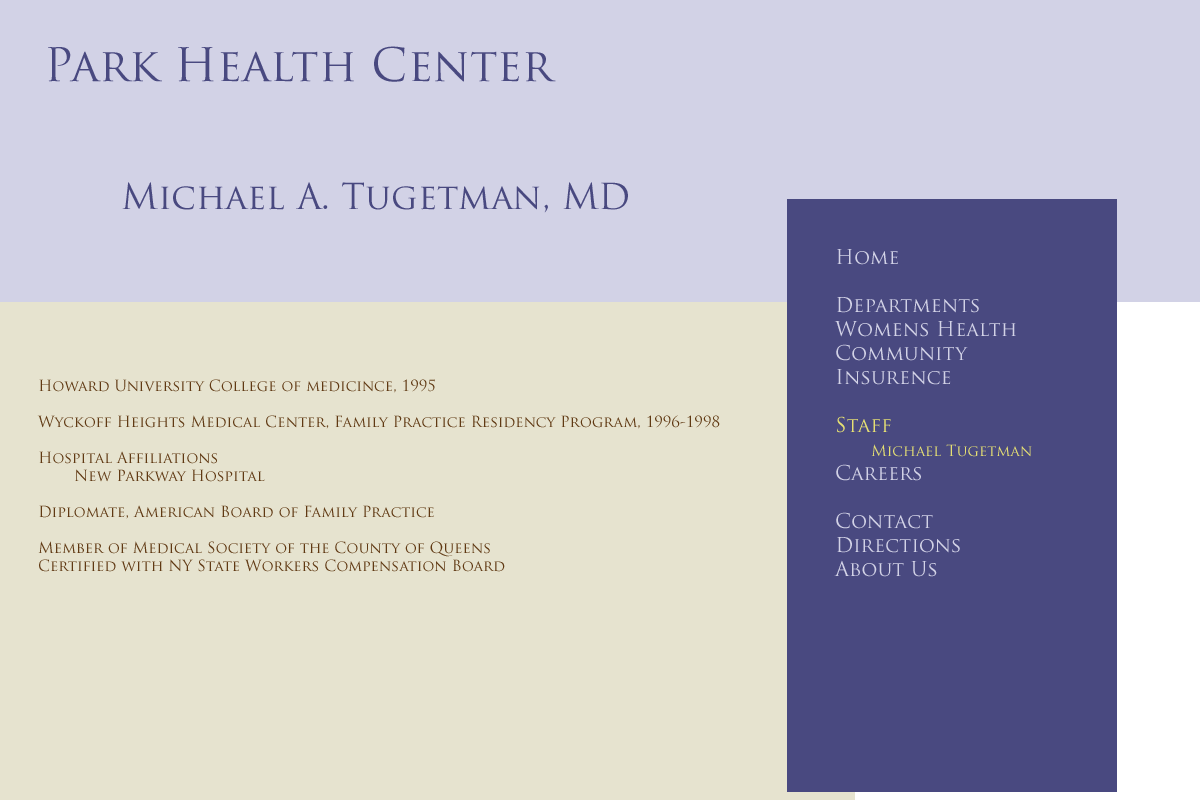
<style>
.page{position:relative;width:1200px;height:800px;background:#e6e3cf}
.page>*{position:absolute;margin:0}
.t1{font:45px "TrajanPro-Regular";color:#494980}
.t2{font:35px "TrajanPro-Regular";color:#494980}
.t3{font:20px "TrajanPro-Regular";color:#d2d2e6}
.t4{font:20px "TrajanPro-Regular";color:#e6e073}
.t5{font:15px "TrajanPro-Regular";color:#e6e073}
.t6{font:15px "TrajanPro-Regular";color:#603913}
</style>
<div class="page">
<p class="t1" style="left:48px;top:46px;width:508px;height:36px">Park Health Center</p>
<p class="t2" style="left:122px;top:182px;width:506px;height:31px">Michael A. Tugetman, MD</p>
<p class="t3" style="left:834px;top:249px;width:198px;height:328px">Home<br><br>Departments<br>Womens Health<br>Community<br>Insurence<br><br><span class="t4">Staff<br> </span><span class="t5">Michael Tugetman<br></span>Careers<br><br>Contact<br>Directions<br>About Us</p>
<p class="t6" style="left:37px;top:379px;width:683px;height:193px">Howard University College of medicince, 1995<br><br>Wyckoff Heights Medical Center, Family Practice Residency Program, 1996-1998<br><br>Hospital Affiliations<br> New Parkway Hospital<br><br>Diplomate, American Board of Family Practice<br><br>Member of Medical Society of the County of Queens<br>Certified with NY State Workers Compensation Board</p>
</div>
